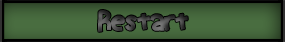
<style>
.page{position:relative;width:285px;height:42px}
.page>*{position:absolute;margin:0}
.t1{font:32px "Animated"}
</style>
<div class="page">
<p class="t1" style="left:98px;top:10px;width:90px;height:22px">Restart</p>
</div>
